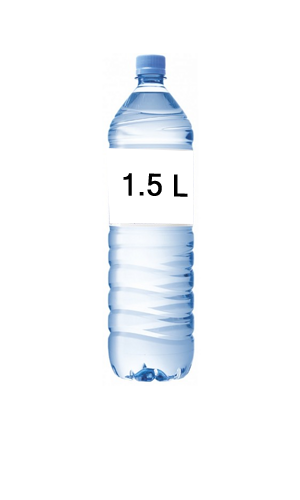
<style>
.page{position:relative;width:300px;height:500px;background:#ffffff}
.page>*{position:absolute;margin:0}
.t1{font:30px "MicrosoftSansSerif";color:#000000;font-weight:bold;scale:0.96 1}
</style>
<div class="page">
<p class="t1" style="left:123px;top:173px;width:65px;height:24px;rotate:1deg">1.5 L</p>
</div>
